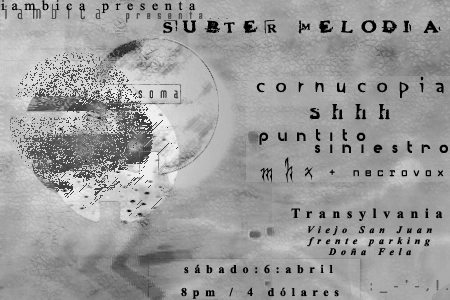
<style>
.page{position:relative;width:450px;height:300px}
.page>*{position:absolute;margin:0}
.t1{font:14px "TimesNewRomanPSMT";letter-spacing:0.475em;color:#000000}
.t2{font:14px "HeroinSheik";letter-spacing:0.475em;color:#000000}
.t3{font:22px "OrangeLetPlain";letter-spacing:0.475em;color:#000000}
.t4{font:24px "MataHari";letter-spacing:0.475em;color:#000000}
.t5{font:18px "BabyFace";letter-spacing:0.475em;color:#000000}
.t6{font:26px "Creepygirl";letter-spacing:0.475em;color:#000000}
.t7{font:12px "LarabiefontBold";letter-spacing:0.475em;color:#000000}
.t8{font:14px "TimesNewRomanPS-BoldMT";letter-spacing:0.475em;color:#000000}
.t9{font:10px "TimesNewRomanPS-BoldItalicMT";letter-spacing:0.475em;color:#000000}
.t10{font:12px "TimesNewRomanPS-BoldMT";letter-spacing:0.475em;color:#000000}
</style>
<div class="page">
<p class="t1" style="left:1px;top:0px;width:195px;height:13px">iambica presenta</p>
<p class="t2" style="left:163px;top:19px;width:278px;height:15px">subter melodia</p>
<p class="t3" style="left:256px;top:76px;width:188px;height:22px">cornucopia</p>
<p class="t4" style="left:309px;top:104px;width:81px;height:16px">shhh</p>
<p class="t5" style="left:259px;top:129px;width:107px;height:16px">puntito</p>
<p class="t5" style="left:314px;top:141px;width:134px;height:12px">siniestro</p>
<p class="t6" style="left:260px;top:157px;width:53px;height:26px">mhx</p>
<p class="t7" style="left:329px;top:169px;width:115px;height:8px">+ necrovox</p>
<p class="t8" style="left:291px;top:208px;width:152px;height:14px">Transylvania</p>
<p class="t9" style="left:308px;top:226px;width:124px;height:10px">Viejo San Juan</p>
<p class="t9" style="left:307px;top:237px;width:124px;height:10px">frente parking</p>
<p class="t9" style="left:328px;top:248px;width:83px;height:8px">Doña Fela</p>
<p class="t10" style="left:184px;top:264px;width:149px;height:10px">sábado:6:abril</p>
<p class="t10" style="left:181px;top:287px;width:158px;height:12px">8pm / 4 dólares</p>
</div>
